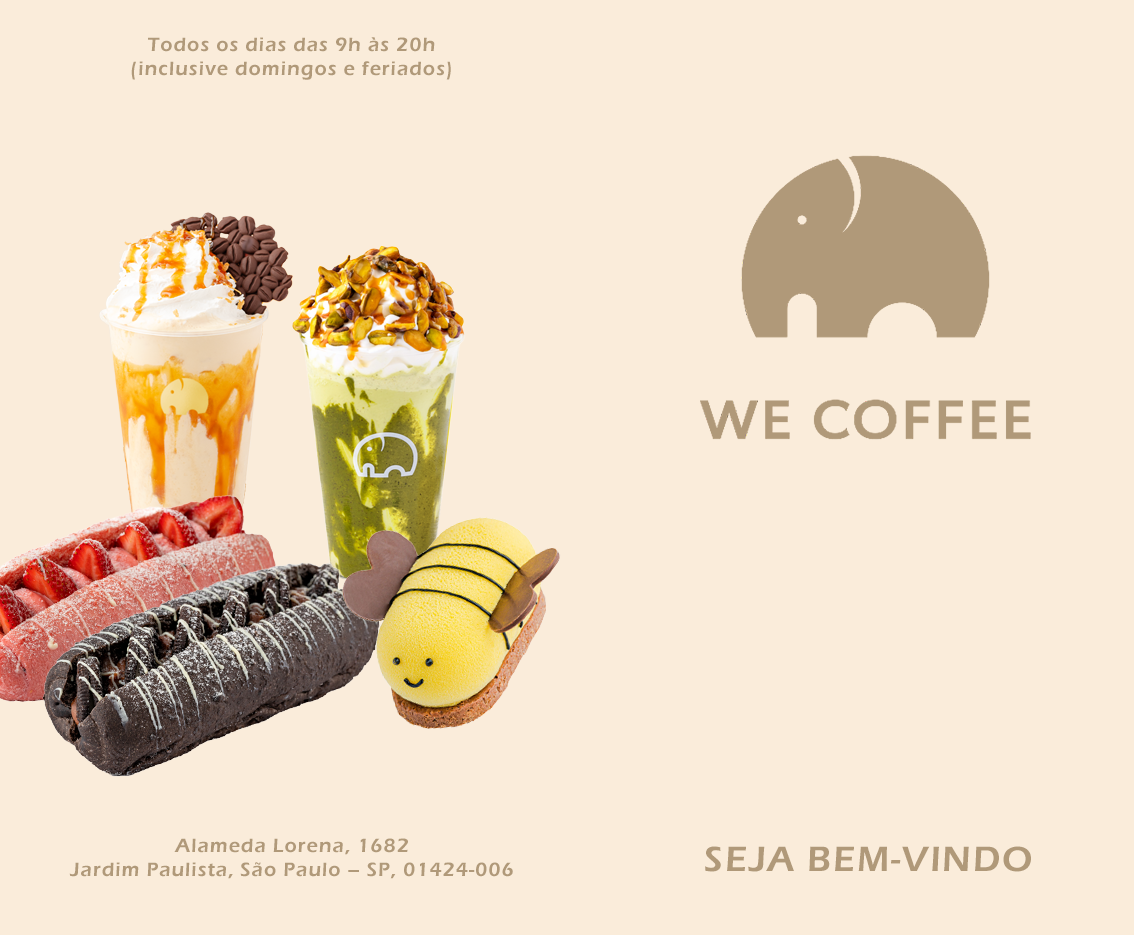
<style>
.page{position:relative;width:1134px;height:935px;background:#faecda}
.page>*{position:absolute;margin:0}
.t1{font:20px "ErasITC-Demi";letter-spacing:0.05em;color:#b09979}
.t2{font:36.3px "ErasITC-Demi";letter-spacing:0.05em;color:#b09979}
</style>
<div class="page">
<p class="t1" style="left:131px;top:37px;width:320px;height:43px;text-align:center">Todos os dias das 9h às 20h<br>(inclusive domingos e feriados)</p>
<p class="t1" style="left:69px;top:838px;width:444px;height:41px;text-align:center">Alameda Lorena, 1682<br>Jardim Paulista, São Paulo – SP, 01424-006</p>
<p class="t2" style="left:705px;top:846px;width:326px;height:26px">SEJA BEM-VINDO</p>
</div>
